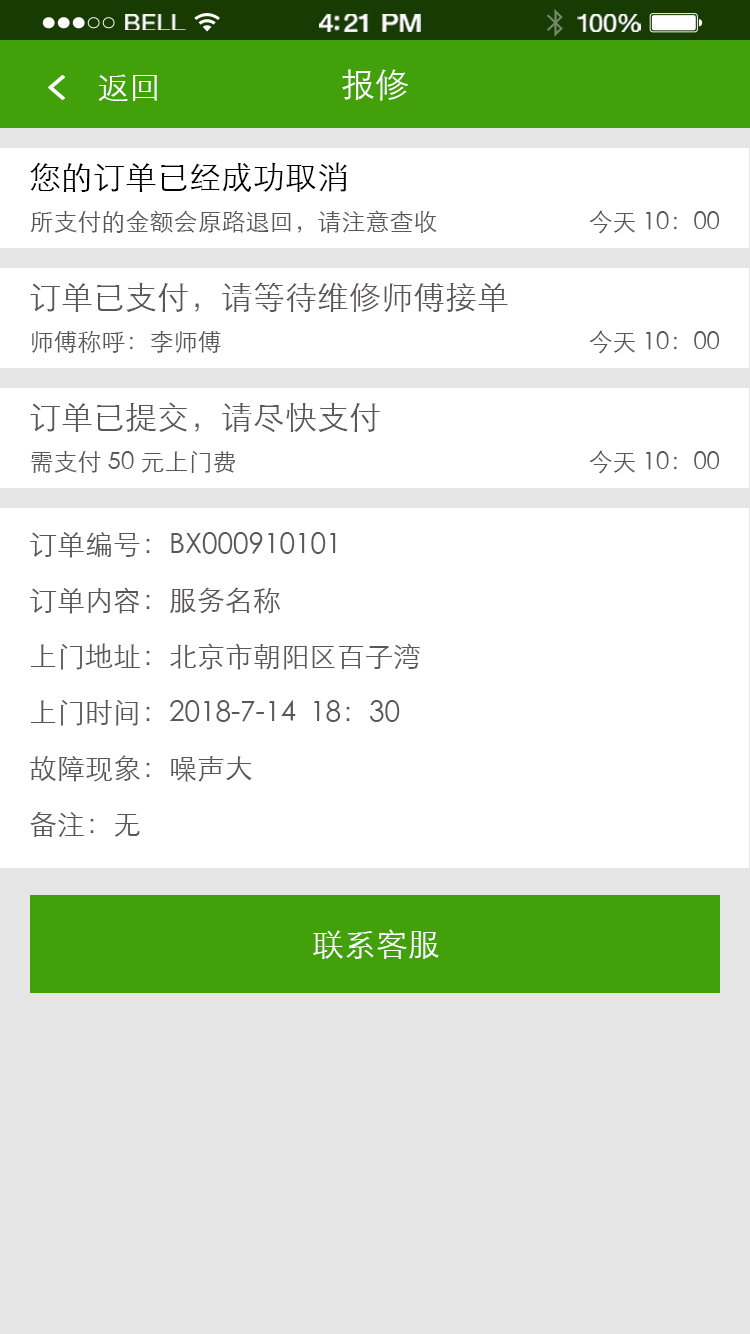
<style>
.page{position:relative;width:750px;height:1334px;background:#ffffff}
.page>*{position:absolute;margin:0}
.t1{font:23.3px "HelveticaNeue";letter-spacing:0.02em;color:#ffffff;scale:1.06 1}
.t2{font:25.3px "HelveticaNeue-Medium";letter-spacing:-0.02em;color:#ffffff;scale:1.06 1}
.t3{font:24.3px "HelveticaNeue";letter-spacing:-0.02em;color:#ffffff;scale:1.06 1}
.t4{font:32px "STXihei";color:#ffffff}
.t5{font:34px "STXihei";color:#ffffff}
.t6{font:32px "STXihei";color:#000000}
.t7{font:24px "STXihei";color:#595757}
.t8{font:32px "STXihei";color:#595757}
.t9{font:28px/56px "STXihei";color:#595757}
</style>
<div class="page">
<p class="t1" style="left:125px;top:14px;width:61px;height:16px">BELL</p>
<p class="t2" style="left:319px;top:14px;width:102px;height:18px">4:21 PM</p>
<p class="t3" style="left:577px;top:14px;width:64px;height:18px">100%</p>
<p class="t4" style="left:98px;top:74px;width:59px;height:27px">返回</p>
<p class="t5" style="left:342px;top:69px;width:66px;height:32px">报修</p>
<p class="t6" style="left:30px;top:162px;width:317px;height:30px">您的订单已经成功取消</p>
<p class="t7" style="left:30px;top:210px;width:407px;height:23px">所支付的金额会原路退回，请注意查收</p>
<p class="t7" style="left:589px;top:210px;width:131px;height:24px">今天 10：00</p>
<p class="t8" style="left:30px;top:282px;width:478px;height:30px">订单已支付，请等待维修师傅接单</p>
<p class="t7" style="left:32px;top:331px;width:189px;height:22px">师傅称呼：李师傅</p>
<p class="t7" style="left:589px;top:330px;width:131px;height:24px">今天 10：00</p>
<p class="t8" style="left:30px;top:402px;width:350px;height:30px">订单已提交，请尽快支付</p>
<p class="t7" style="left:31px;top:450px;width:204px;height:23px">需支付 50 元上门费</p>
<p class="t7" style="left:589px;top:450px;width:131px;height:24px">今天 10：00</p>
<p class="t9" style="left:30px;top:532px;width:390px;height:305px">订单编号：BX000910101<br>订单内容：服务名称<br>上门地址：北京市朝阳区百子湾<br>上门时间：2018-7-14  18：30<br>故障现象：噪声大<br>备注：无</p>
<p class="t4" style="left:313px;top:929px;width:126px;height:30px">联系客服</p>
</div>
